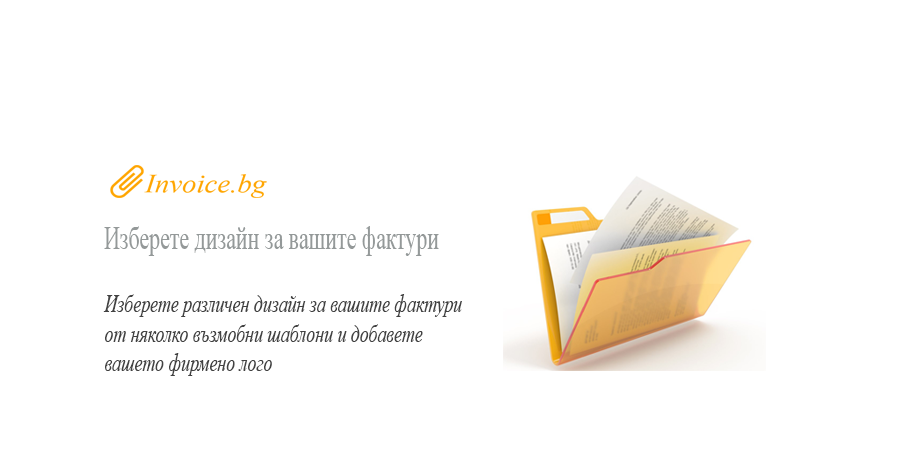
<style>
.page{position:relative;width:900px;height:450px;background:#ffffff}
.page>*{position:absolute;margin:0}
.t1{font:32.5px "TimesNewRomanPSMT";color:#949999;scale:0.67 1}
.t2{font:24.6px "TimesNewRomanPS-ItalicMT";color:#424242;scale:0.73 1}
</style>
<div class="page">
<p class="t1" style="left:104px;top:226px;width:335px;height:30px">Изберете дизайн за вашите фактури</p>
<p class="t2" style="left:103px;top:294px;width:359px;height:82px;text-align:right">Изберете различен дизайн за вашите фактури<br>от няколко възмобни шаблони и добавете<br>вашето фирмено лого</p>
</div>
